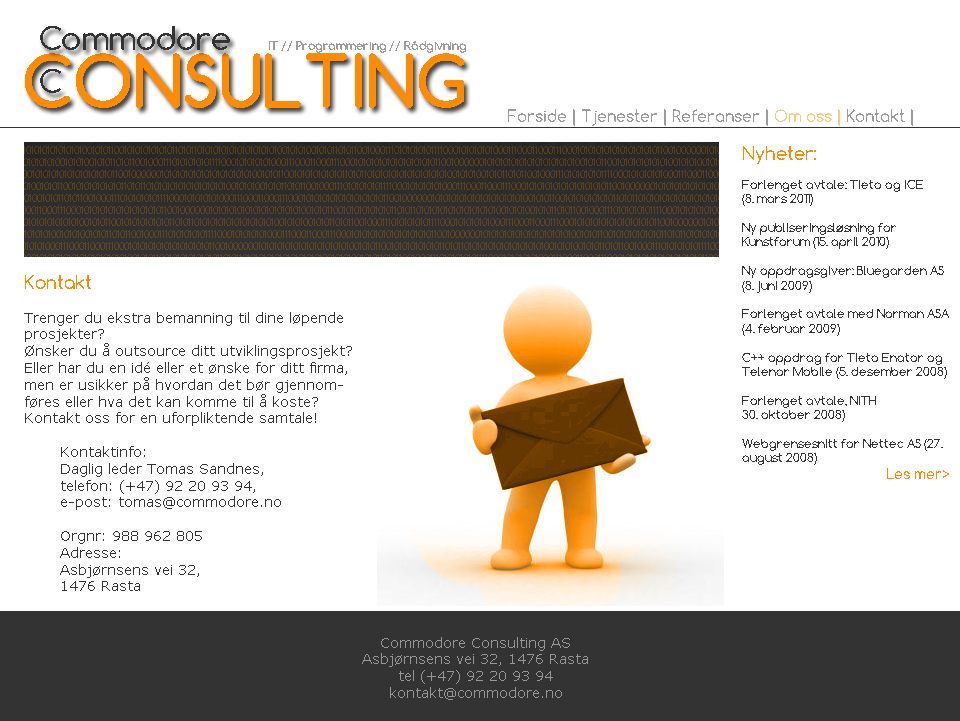
<style>
.page{position:relative;width:960px;height:721px;background:#ffffff}
.page>*{position:absolute;margin:0}
.t1{font:16px "Comfortaa";color:#9b9b9b}
.t2{font:12px "Comfortaa";color:#333333}
.t3{font:18px "Comfortaa";color:#ff8c00}
.t4{font:14px "Comfortaa";color:#ff8c00}
.t5{font:14px "Verdana";color:#333333}
.t6{font:14px "Verdana";color:#979797}
</style>
<div class="page">
<p class="t1" style="left:508px;top:109px;width:405px;height:17px">Forside | Tjenester | Referanser | Om oss | Kontakt |</p>
<p class="t2" style="left:742px;top:146px;width:207px;height:333px"><span class="t3">Nyheter:<br></span><br>Forlenget avtale: Tieto og ICE <br>(8. mars 2011)<br><br>Ny publiseringsløsning for <br>Kunstforum (15. april 2010)<br><br>Ny oppdragsgiver: Bluegarden AS (8. juni 2009)<br><br>Forlenget avtale med Norman ASA (4. februar 2009)<br><br>C++ oppdrag for Tieto Enator og Telenor Mobile (5. desember 2008)<br><br>Forlenget avtale, NITH <br>30. oktober 2008)<br><br>Webgrensesnitt for Nettec AS (27. august 2008)<br>    <span class="t4">Les mer&gt;</span></p>
<p class="t5" style="left:24px;top:275px;width:328px;height:316px"><span class="t3">Kontakt<br></span><br>Trenger du ekstra bemanning til dine løpende prosjekter?<br>Ønsker du å outsource ditt utviklingsprosjekt?<br>Eller har du en idé eller et ønske for ditt firma, men er usikker på hvordan det bør gjennomføres eller hva det kan komme til å koste?<br>Kontakt oss for en uforpliktende samtale!<br><br> Kontaktinfo:<br> Daglig leder Tomas Sandnes,<br> telefon: (+47) 92 20 93 94,<br> e-post: tomas@commodore.no<br><br> Orgnr: 988 962 805<br> Adresse:<br> Asbjørnsens vei 32,<br> 1476 Rasta</p>
<p class="t6" style="left:362px;top:637px;width:226px;height:63px;text-align:center">Commodore Consulting AS<br>Asbjørnsens vei 32, 1476 Rasta<br>tel (+47) 92 20 93 94<br>kontakt@commodore.no</p>
</div>
